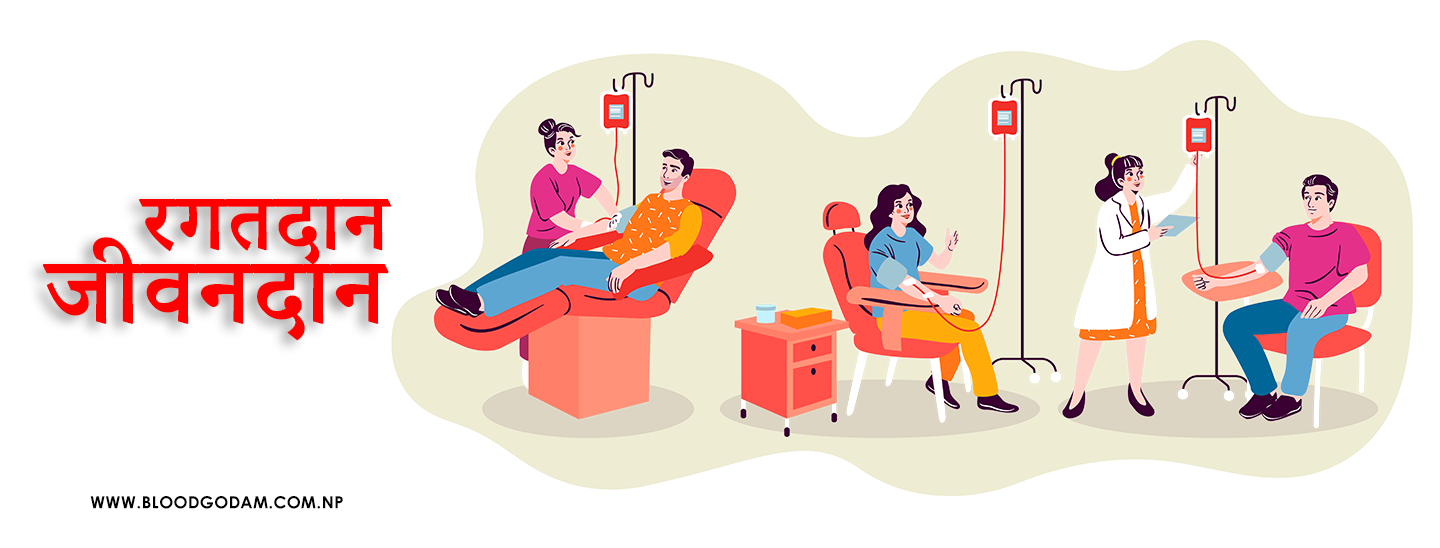
<style>
.page{position:relative;width:1440px;height:548px;background:#ffffff}
.page>*{position:absolute;margin:0}
.t1{font:116.7px/73.4px "AdobeDevanagari-Bold";letter-spacing:0.02em;color:#ff0000;text-transform:uppercase}
.t2{font:88.4px/73.4px "AdobeDevanagari-Bold";letter-spacing:0.02em;color:#ff0000;text-transform:uppercase}
.t3{font:100px/73.4px "AdobeDevanagari-Bold";letter-spacing:0.02em;color:#ff0000;text-transform:uppercase}
.t4{font:16.7px "CenturyGothic-Bold";letter-spacing:0.02em;color:#010101;text-transform:uppercase}
</style>
<div class="page">
<p class="t1" style="left:42px;top:199px;width:350px;height:142px;text-align:center"><span class="t2">     </span><span class="t3">रगतदान<br></span>जीवनदान</p>
<p class="t4" style="left:90px;top:496px;width:253px;height:13px">www.bloodgodam.com.np</p>
</div>
